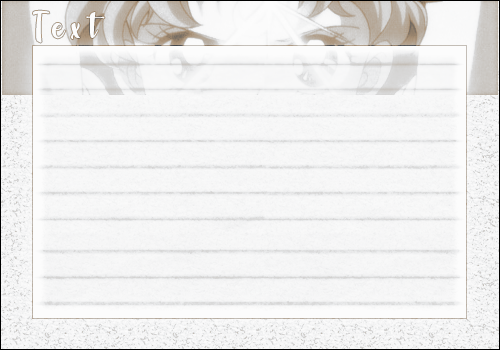
<style>
.page{position:relative;width:500px;height:350px}
.page>*{position:absolute;margin:0}
.t1{font:48px "Kindly-Jasmine";letter-spacing:0.18em;color:#ffffff}
</style>
<div class="page">
<p class="t1" style="left:33px;top:10px;width:72px;height:33px">Text</p>
</div>
